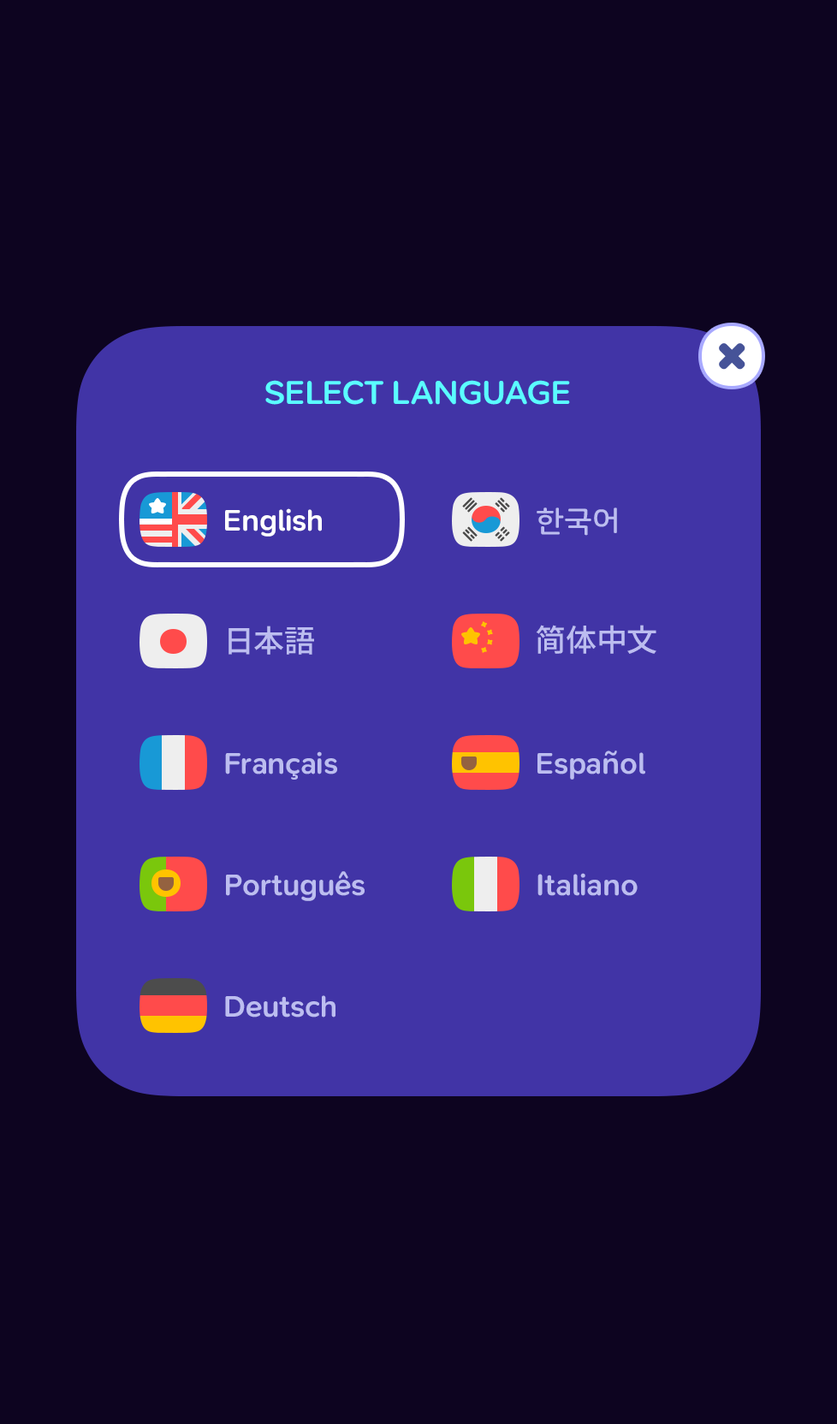
<style>
.page{position:relative;width:837px;height:1424px;background:#0d0420}
.page>*{position:absolute;margin:0}
.t1{font:34.2px "SNPro-SemiBold";letter-spacing:-0.025em;color:#5afdff;text-transform:uppercase}
.t2{font:30.8px "SNPro-SemiBold";letter-spacing:-0.01em;color:#ffffff}
.t3{font:29.3px "NanumSquareRoundB";letter-spacing:-0.01em;color:#bcbdf0;scale:1.06 1}
.t4{font:30.8px "NotoSansCJKkr-Medium";color:#bcbdf0}
.t5{font:30.8px "SNPro-SemiBold";letter-spacing:-0.01em;color:#bcbdf0}
</style>
<div class="page">
<p class="t1" style="left:265px;top:380px;width:305px;height:25px">Select Language</p>
<p class="t2" style="left:225px;top:508px;width:97px;height:29px">English</p>
<p class="t3" style="left:537px;top:508px;width:80px;height:28px">한국어</p>
<p class="t4" style="left:229px;top:626px;width:85px;height:29px">日本語</p>
<p class="t4" style="left:536px;top:625px;width:121px;height:29px">简体中文</p>
<p class="t5" style="left:225px;top:752px;width:112px;height:28px">Français</p>
<p class="t5" style="left:538px;top:751px;width:107px;height:29px">Español</p>
<p class="t5" style="left:226px;top:871px;width:139px;height:30px">Português</p>
<p class="t5" style="left:538px;top:873px;width:100px;height:23px">Italiano</p>
<p class="t5" style="left:225px;top:996px;width:111px;height:22px">Deutsch</p>
</div>
